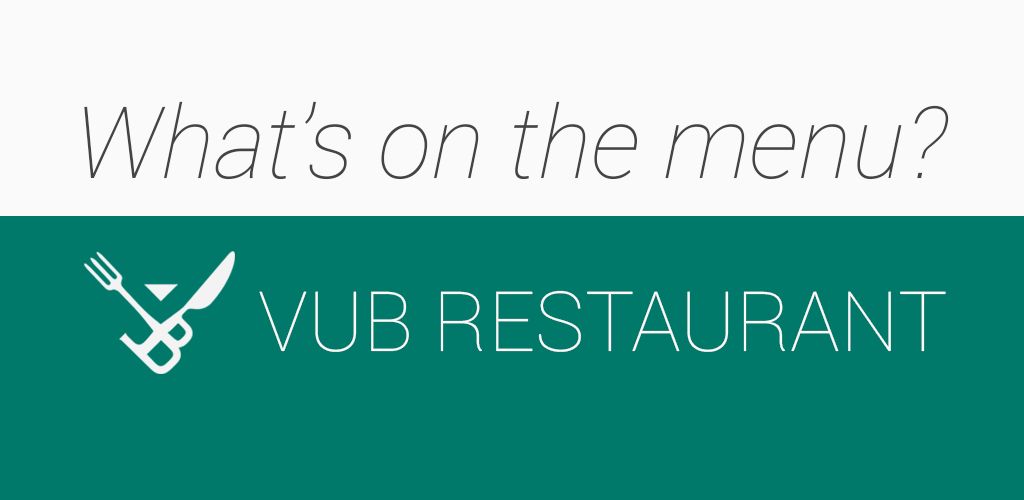
<style>
.page{position:relative;width:1024px;height:500px;background:#00796b}
.page>*{position:absolute;margin:0}
.t1{font:100px "Roboto-ThinItalic";color:#444444}
.t2{font:83.3px "Roboto-Thin";color:#fafafa}
</style>
<div class="page">
<p class="t1" style="left:84px;top:101px;width:865px;height:79px">What’s on the menu?</p>
<p class="t2" style="left:259px;top:290px;width:687px;height:62px">VUB RESTAURANT</p>
</div>
